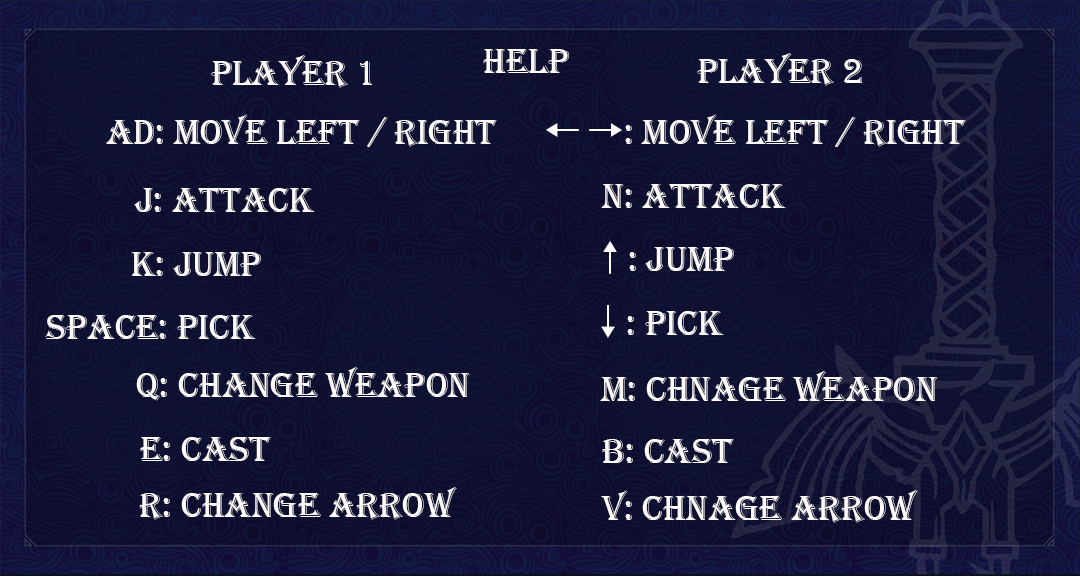
<style>
.page{position:relative;width:1080px;height:576px}
.page>*{position:absolute;margin:0}
.t1{font:36px "Algerian";color:#fefcfc}
.t2{font:36px "AdobeHeitiStd-Regular";color:#fefcfc}
</style>
<div class="page">
<p class="t1" style="left:697px;top:53px;width:165px;height:33px">player 2</p>
<p class="t1" style="left:211px;top:55px;width:162px;height:33px">Player 1</p>
<p class="t1" style="left:106px;top:114px;width:391px;height:33px">AD: Move left / right</p>
<p class="t1" style="left:546px;top:114px;width:420px;height:33px"><span class="t2">← →</span>: move left / right</p>
<p class="t1" style="left:601px;top:184px;width:185px;height:24px">N: attack</p>
<p class="t1" style="left:134px;top:188px;width:181px;height:24px">J: Attack</p>
<p class="t1" style="left:603px;top:241px;width:131px;height:33px"><span class="t2">↑</span>: jump</p>
<p class="t1" style="left:131px;top:252px;width:130px;height:24px">K: Jump</p>
<p class="t1" style="left:601px;top:305px;width:123px;height:33px"><span class="t2">↓</span>: pick</p>
<p class="t1" style="left:45px;top:315px;width:211px;height:24px">Space: Pick</p>
<p class="t1" style="left:136px;top:366px;width:334px;height:35px">Q: Change weapon</p>
<p class="t1" style="left:600px;top:370px;width:338px;height:31px">M: chnage weapon</p>
<p class="t1" style="left:140px;top:437px;width:131px;height:24px">E: Cast</p>
<p class="t1" style="left:602px;top:439px;width:132px;height:24px">B: cast</p>
<p class="t1" style="left:139px;top:486px;width:318px;height:34px">R: change arrow</p>
<p class="t1" style="left:601px;top:489px;width:317px;height:34px">V: chnage arrow</p>
</div>
